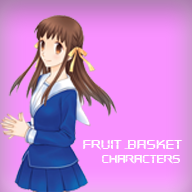
<style>
.page{position:relative;width:192px;height:192px;background:#f992ff}
.page>*{position:absolute;margin:0}
.t1{font:12.9px "DigifaceWide";color:#ffffff}
.t2{font:11.2px "DigifaceWide";color:#ffffff}
</style>
<div class="page">
<p class="t1" style="left:83px;top:140px;width:100px;height:10px">Fruit Basket</p>
<p class="t2" style="left:102px;top:155px;width:78px;height:9px">Characters</p>
</div>
